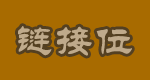
<style>
.page{position:relative;width:150px;height:80px;background:#a86b00}
.page>*{position:absolute;margin:0}
.t1{font:40px "STLiti";color:#bfaa8b}
</style>
<div class="page">
<p class="t1" style="left:18px;top:26px;width:114px;height:30px">链接位</p>
</div>
